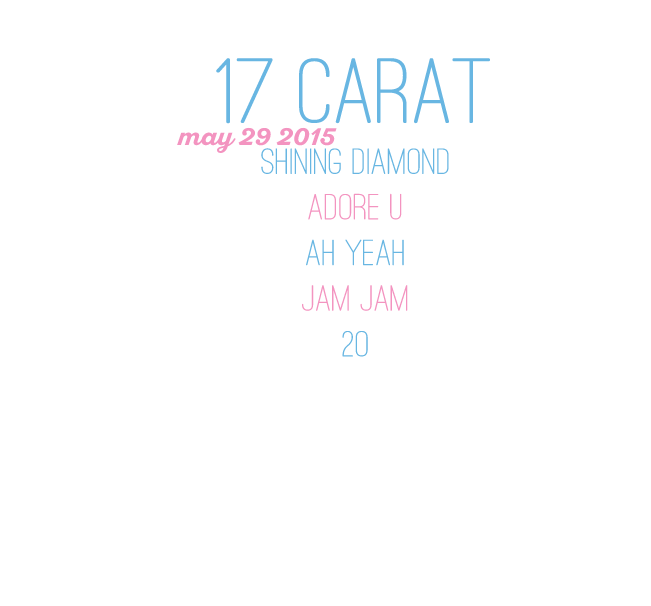
<style>
.page{position:relative;width:651px;height:606px;background:#ffffff}
.page>*{position:absolute;margin:0}
.t1{font:96px "OstrichSansRounded-Medium";color:#68b6e2;scale:1.1 1}
.t2{font:24px "SantEliaScript-BoldDMO";color:#f394c0;scale:1.1 1}
.t3{font:38px "OstrichSansRounded-Medium";color:#68b6e2;scale:1.1 1}
.t4{font:38px "OstrichSansRounded-Medium";color:#f394c0;scale:1.1 1}
</style>
<div class="page">
<p class="t1" style="left:216px;top:58px;width:274px;height:66px">17 Carat</p>
<p class="t2" style="left:177px;top:127px;width:160px;height:26px">may 29 2015</p>
<p class="t3" style="left:261px;top:148px;width:188px;height:209px;text-align:center">Shining Diamond<br><span class="t4">Adore U<br></span>Ah Yeah<br><span class="t4">Jam Jam<br></span>20</p>
</div>
